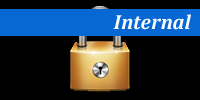
<style>
.page{position:relative;width:200px;height:100px;background:#000000}
.page>*{position:absolute;margin:0}
.t1{font:20.8px "Cambria-BoldItalic";color:#fbfcfe}
</style>
<div class="page">
<p class="t1" style="left:113px;top:14px;width:78px;height:16px">Internal</p>
</div>
